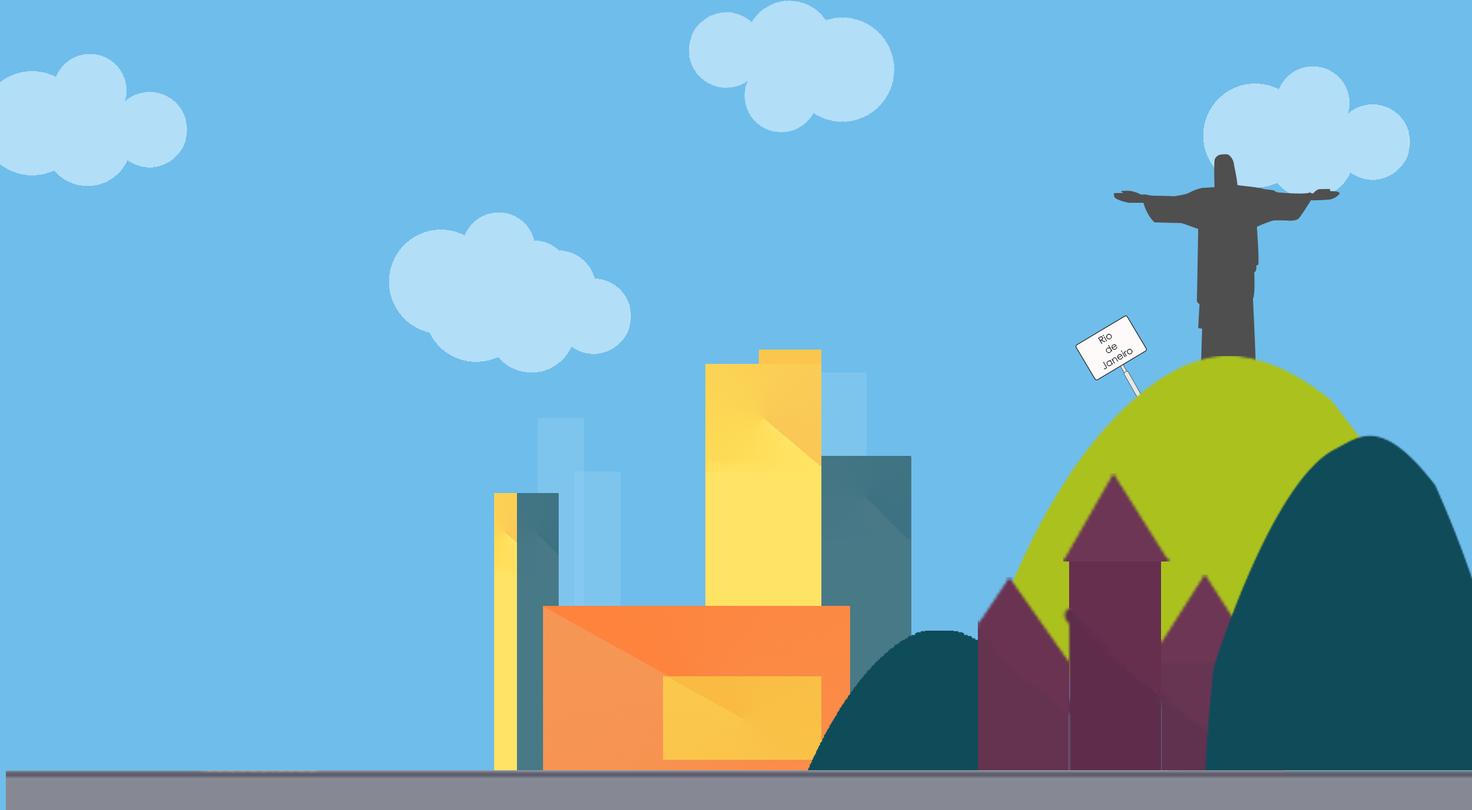
<style>
.page{position:relative;width:1472px;height:810px;background:#6fbdeb}
.page>*{position:absolute;margin:0}
.t1{font:9.7px "CenturyGothic";color:#0c0d0d}
</style>
<div class="page">
<p class="t1" style="left:1098px;top:333px;width:35px;height:37px;text-align:center;rotate:-31deg">Rio <br>de<br>Janeiro</p>
</div>
